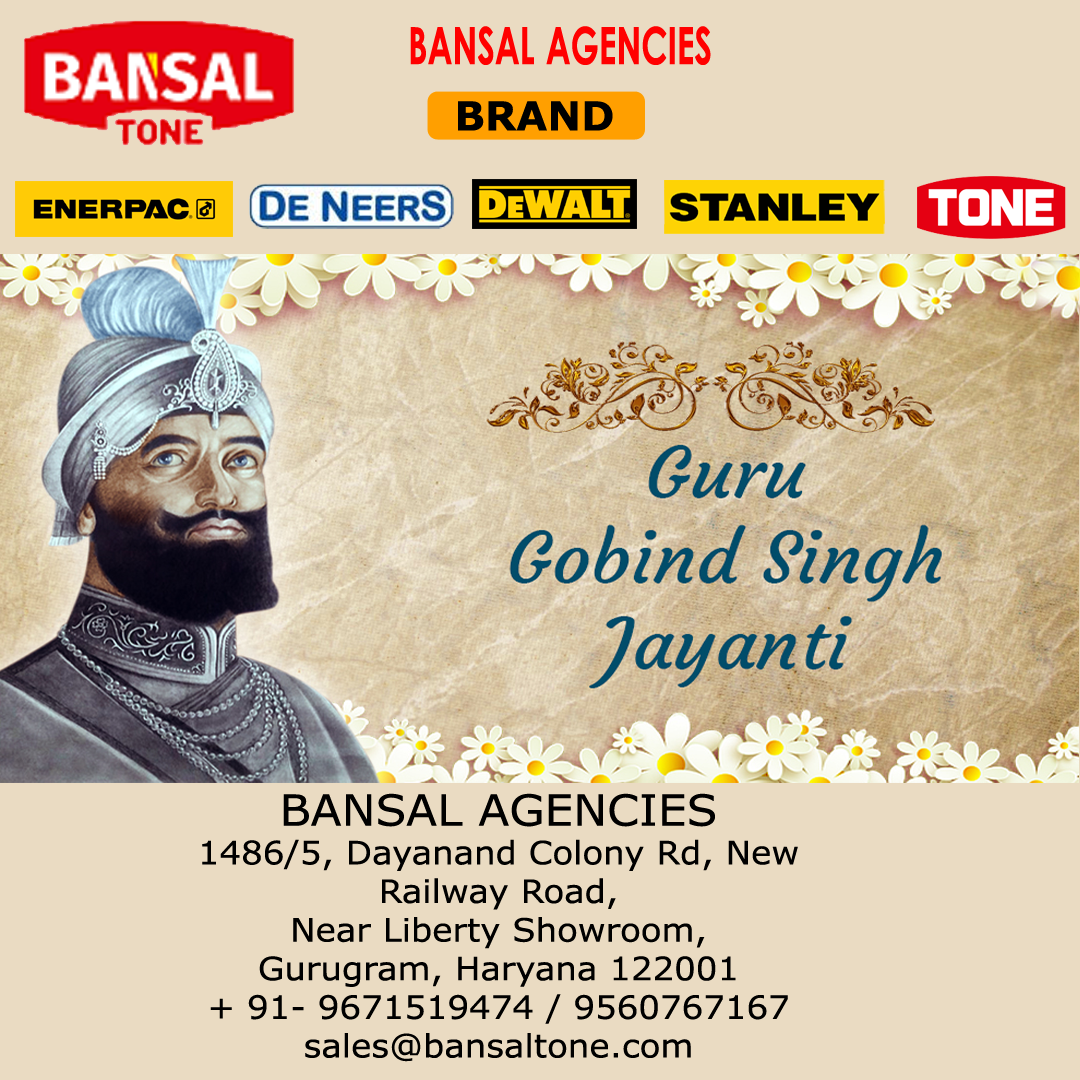
<style>
.page{position:relative;width:1080px;height:1080px;background:#eadbc2}
.page>*{position:absolute;margin:0}
.t1{font:51.2px "LevenimMT-Bold";color:#ff0000;scale:0.66 1}
.t2{font:40px "Verdana-Bold";color:#000000}
.t3{font:32.2px "Verdana";color:#000000;scale:1.06 1}
.t4{font:42.9px "Verdana";color:#000000;scale:1.06 1}
</style>
<div class="page">
<p class="t1" style="left:410px;top:26px;width:301px;height:39px">BANSAL AGENCIES</p>
<p class="t2" style="left:458px;top:101px;width:155px;height:30px">BRAND</p>
<p class="t3" style="left:202px;top:793px;width:596px;height:269px;text-align:center"><span class="t4">BANSAL AGENCIES<br></span>1486/5, Dayanand Colony Rd, New <br>Railway Road, <br>Near Liberty Showroom,<br>Gurugram, Haryana 122001<br>+ 91- 9671519474 / 9560767167<br>sales@bansaltone.com</p>
</div>
